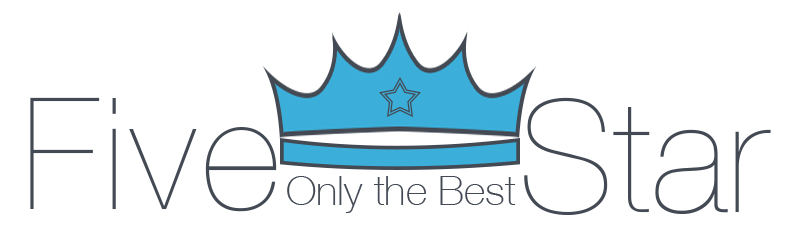
<style>
.page{position:relative;width:800px;height:230px;background:#ffffff}
.page>*{position:absolute;margin:0}
.t1{font:156px "HelveticaNeue-UltraLight";letter-spacing:0.045em;color:#434a54}
.t2{font:156px "HelveticaNeue-UltraLight";color:#434a54}
.t3{font:41px "HelveticaNeue-Thin";color:#434a54}
</style>
<div class="page">
<p class="t1" style="left:30px;top:97px;width:247px;height:115px">Five</p>
<p class="t2" style="left:524px;top:97px;width:247px;height:118px">Star</p>
<p class="t3" style="left:287px;top:176px;width:229px;height:37px">Only the Best</p>
</div>
